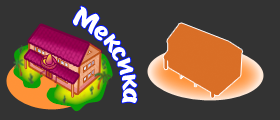
<style>
.page{position:relative;width:280px;height:120px;background:#333333}
.page>*{position:absolute;margin:0}
.t1{font:30px "BrushType-Bold";letter-spacing:-0.01em;color:#ffffff;scale:0.9 1}
</style>
<div class="page">
<p class="t1" style="left:73px;top:6px;width:64px;height:97px;rotate:57deg">Ìåêñèêà</p>
</div>
